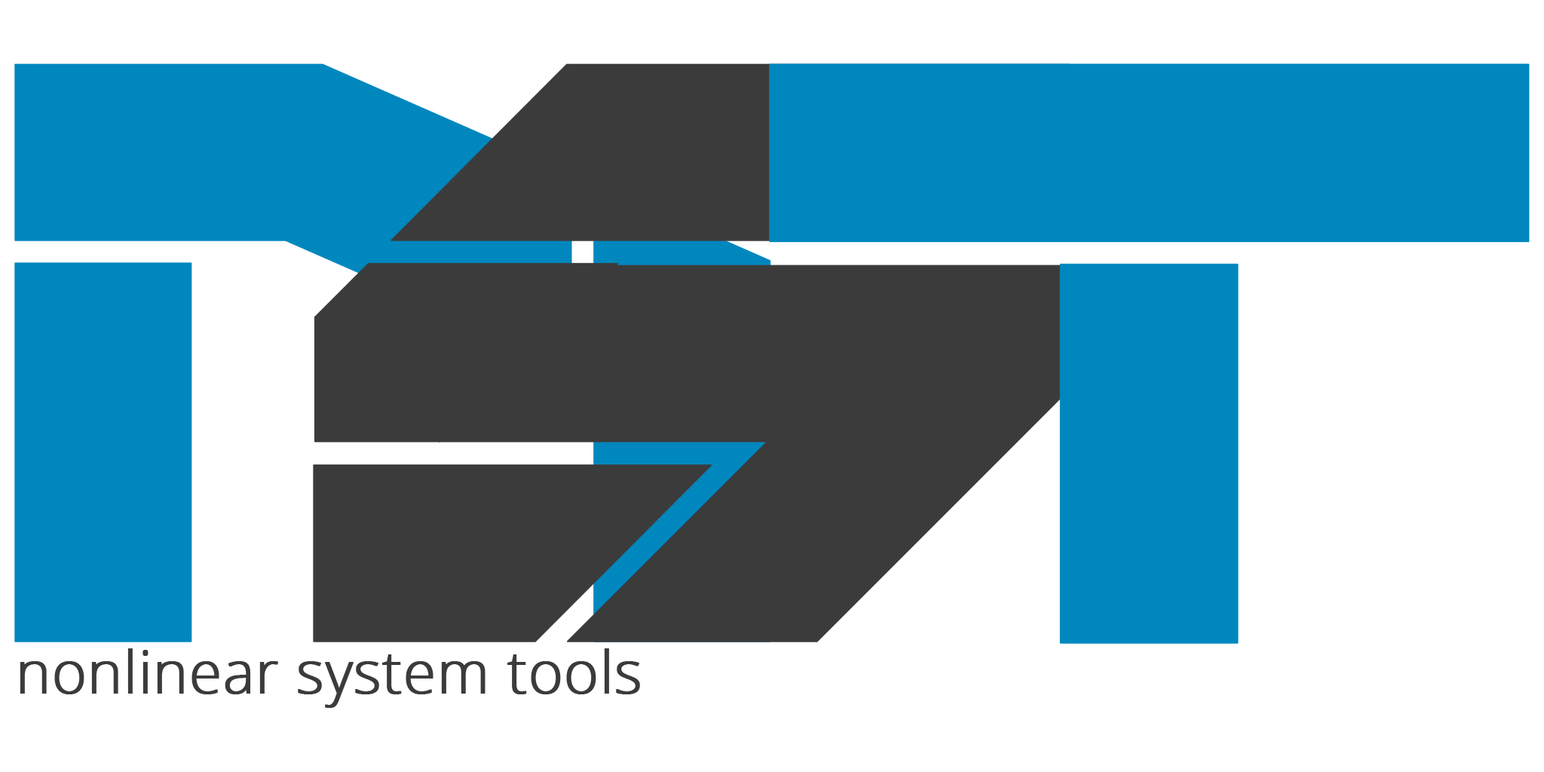
<style>
.page{position:relative;width:1544px;height:772px;background:#ffffff}
.page>*{position:absolute;margin:0}
.t1{font:825.5px "Rektec";font-weight:bold}
.t2{font:825.5px "Rektec";color:#3b3b3b;font-weight:bold}
.t3{font:825.5px "Rektec";color:#0087be;font-weight:bold}
.t4{font:58.4px "OpenSans-Light";color:#3b3b3b;font-weight:bold}
</style>
<div class="page">
<p class="t1" style="left:14px;top:63px;width:757px;height:579px">N</p>
<p class="t2" style="left:313px;top:63px;width:758px;height:579px">S</p>
<p class="t3" style="left:769px;top:63px;width:761px;height:581px">T</p>
<p class="t4" style="left:20px;top:648px;width:620px;height:60px">nonlinear system tools</p>
</div>
